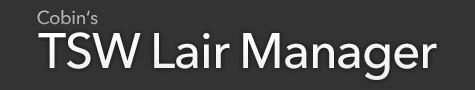
<style>
.page{position:relative;width:475px;height:90px;background:#333333}
.page>*{position:absolute;margin:0}
.t1{font:18.6px "AvenirNextLTPro-Medium";letter-spacing:-0.025em;color:#b0b0b0}
.t2{font:49.6px "AvenirNextLTPro-Medium";letter-spacing:-0.025em;color:#ffffff}
</style>
<div class="page">
<p class="t1" style="left:37px;top:10px;width:61px;height:15px">Cobin‘s</p>
<p class="t2" style="left:38px;top:32px;width:399px;height:48px">TSW Lair Manager</p>
</div>
